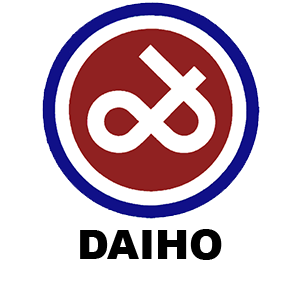
<style>
.page{position:relative;width:300px;height:300px;background:#ffffff}
.page>*{position:absolute;margin:0}
.t1{font:41.1px "Arial-Black";color:#000000}
</style>
<div class="page">
<p class="t1" style="left:80px;top:229px;width:142px;height:31px">DAIHO</p>
</div>
